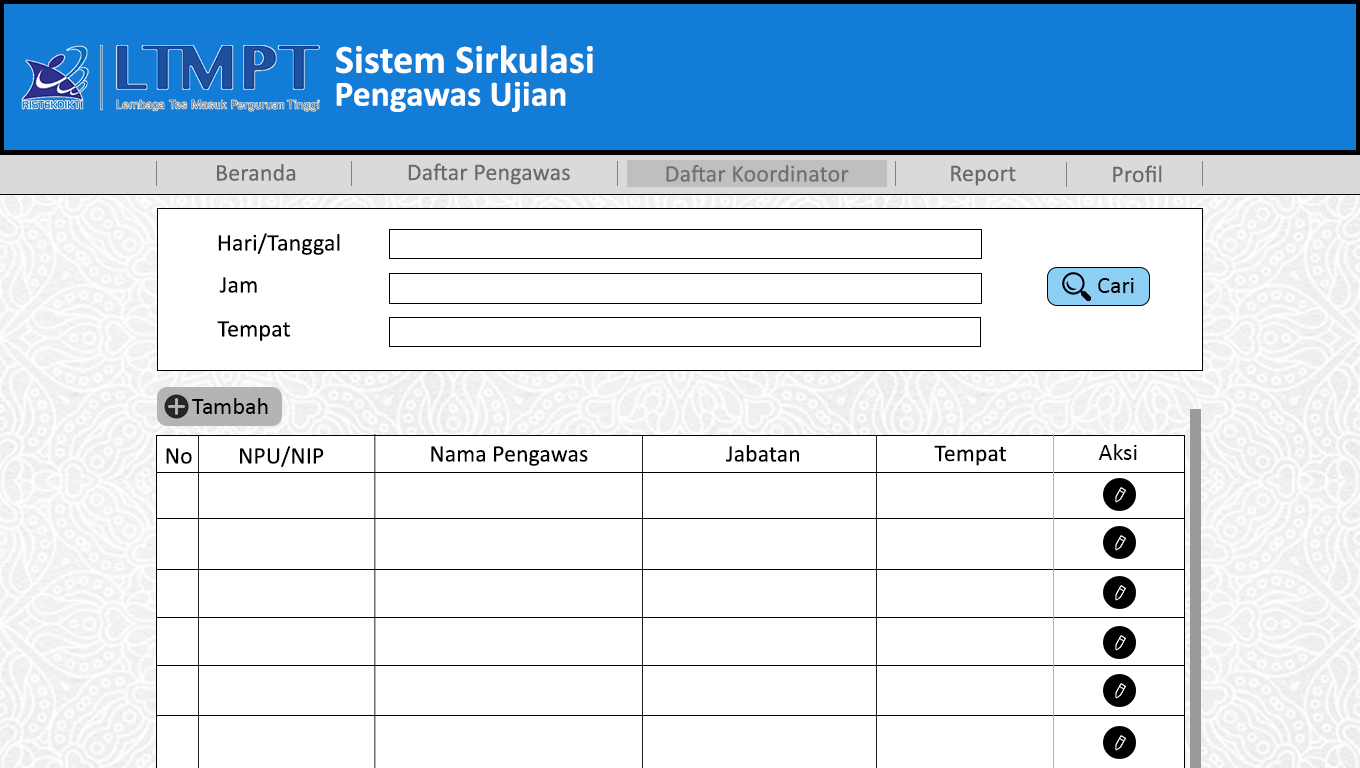
<style>
.page{position:relative;width:1360px;height:768px;background:#ffffff}
.page>*{position:absolute;margin:0}
.t1{font:40.1px "Calibri-Bold";letter-spacing:0.005em;color:#fdfdfd}
.t2{font:35.6px "Calibri-Bold";letter-spacing:0.005em;color:#fffefe}
.t3{font:24px "Calibri";letter-spacing:0.005em;color:#6a6969}
.t4{font:24px "Calibri";letter-spacing:0.005em;color:#000000}
.t5{font:24px "Calibri";color:#000101}
.t6{font:24px "Calibri";color:#000000}
</style>
<div class="page">
<p class="t1" style="left:336px;top:45px;width:257px;height:29px">Sistem Sirkulasi</p>
<p class="t2" style="left:336px;top:81px;width:230px;height:31px">Pengawas Ujian</p>
<p class="t3" style="left:217px;top:164px;width:79px;height:17px">Beranda</p>
<p class="t3" style="left:408px;top:163px;width:162px;height:22px">Daftar Pengawas</p>
<p class="t3" style="left:666px;top:165px;width:183px;height:17px">Daftar Koordinator</p>
<p class="t3" style="left:951px;top:165px;width:65px;height:21px">Report</p>
<p class="t3" style="left:1113px;top:165px;width:49px;height:18px">Profil</p>
<p class="t4" style="left:218px;top:233px;width:122px;height:22px">Hari/Tanggal</p>
<p class="t4" style="left:219px;top:277px;width:38px;height:16px">Jam</p>
<p class="t4" style="left:217px;top:321px;width:73px;height:20px">Tempat</p>
<p class="t5" style="left:192px;top:398px;width:76px;height:16px">Tambah</p>
<p class="t4" style="left:166px;top:448px;width:26px;height:16px">No</p>
<p class="t4" style="left:240px;top:446px;width:84px;height:21px">NPU/NIP</p>
<p class="t4" style="left:431px;top:446px;width:157px;height:20px">Nama Pengawas</p>
<p class="t4" style="left:726px;top:445px;width:73px;height:17px">Jabatan</p>
<p class="t4" style="left:934px;top:445px;width:72px;height:21px">Tempat</p>
<p class="t6" style="left:1098px;top:444px;width:39px;height:16px">Aksi</p>
</div>
